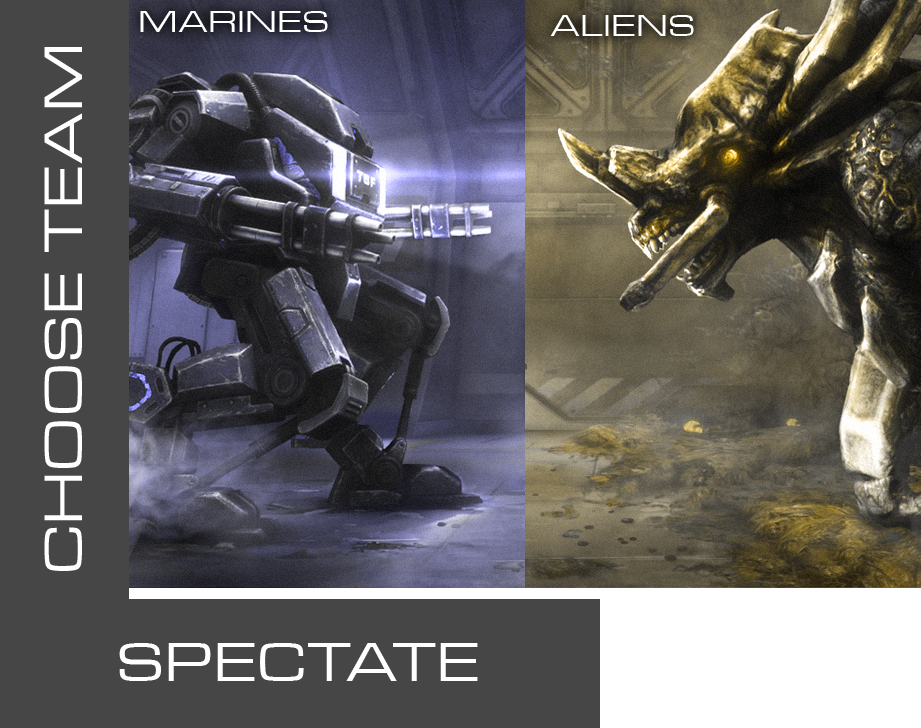
<style>
.page{position:relative;width:921px;height:728px;background:#464646}
.page>*{position:absolute;margin:0}
.t1{font:32px "MicrogrammaD-MediExte";letter-spacing:0.06em;color:#ffffff;text-transform:uppercase}
.t2{font:56.3px "MicrogrammaD-MediExte";letter-spacing:0.06em;color:#ffffff;text-transform:uppercase}
</style>
<div class="page">
<p class="t1" style="left:140px;top:11px;width:188px;height:21px">Marines</p>
<p class="t1" style="left:550px;top:15px;width:144px;height:21px">Aliens</p>
<p class="t2" style="left:44px;top:47px;width:38px;height:524px;rotate:-90deg">Choose team</p>
<p class="t2" style="left:119px;top:643px;width:359px;height:38px">Spectate</p>
</div>
